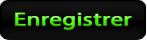
<style>
.page{position:relative;width:147px;height:41px}
.page>*{position:absolute;margin:0}
.t1{font:18.7px "MyriadPro-Regular";font-weight:bold;scale:1.31 1}
</style>
<div class="page">
<p class="t1" style="left:15px;top:12px;width:117px;height:18px">Enregistrer</p>
</div>
